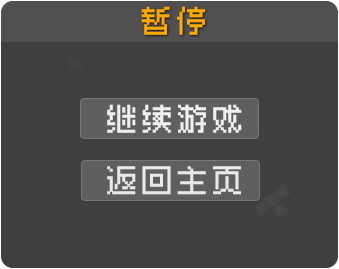
<style>
.page{position:relative;width:339px;height:269px;background:#403f3f}
.page>*{position:absolute;margin:0}
.t1{font:30px "Zpix";letter-spacing:0.05em;color:#faaa00;font-weight:bold}
.t2{font:30px "Zpix";letter-spacing:0.05em;color:#f0f0ef;font-weight:bold}
.t3{font:30px "Zpix";letter-spacing:0.05em;color:#eae9e8;font-weight:bold}
</style>
<div class="page">
<p class="t1" style="left:141px;top:6px;width:64px;height:29px">暂停</p>
<p class="t2" style="left:107px;top:104px;width:135px;height:29px">继续游戏</p>
<p class="t3" style="left:107px;top:166px;width:134px;height:29px">返回主页</p>
</div>
